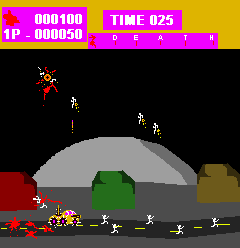
<style>
.page{position:relative;width:240px;height:248px;background:#000000}
.page>*{position:absolute;margin:0}
.t1{font:13px "Arial-BoldMT";color:#ffffff;font-weight:bold}
.t2{font:7px "Arial-BoldMT";color:#ffffff;font-weight:bold}
</style>
<div class="page">
<p class="t1" style="left:35px;top:14px;width:47px;height:10px">000100</p>
<p class="t1" style="left:110px;top:15px;width:63px;height:10px">TIME 025</p>
<p class="t1" style="left:4px;top:29px;width:78px;height:10px">1P - 000050</p>
<p class="t2" style="left:113px;top:35px;width:100px;height:5px">D        E          A           T           H</p>
</div>
